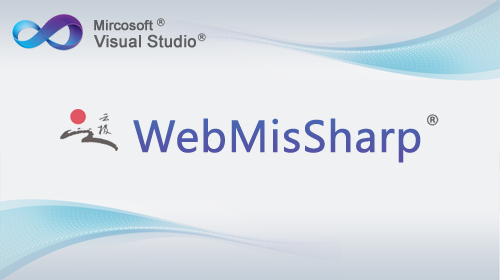
<style>
.page{position:relative;width:500px;height:280px;background:#f0f1f3}
.page>*{position:absolute;margin:0}
.t1{font:13.9px "ArialMT";color:#5a5c5e;font-weight:bold}
.t2{font:16.7px "ArialMT";color:#5d5e5f;font-weight:bold}
.t3{font:41.7px "MicrosoftYaHei";color:#5059a9;font-weight:bold}
</style>
<div class="page">
<p class="t1" style="left:94px;top:20px;width:59px;height:11px">Mircosoft</p>
<p class="t2" style="left:94px;top:34px;width:102px;height:14px">Visual Studio</p>
<p class="t3" style="left:133px;top:118px;width:288px;height:45px">WebMisSharp</p>
</div>
